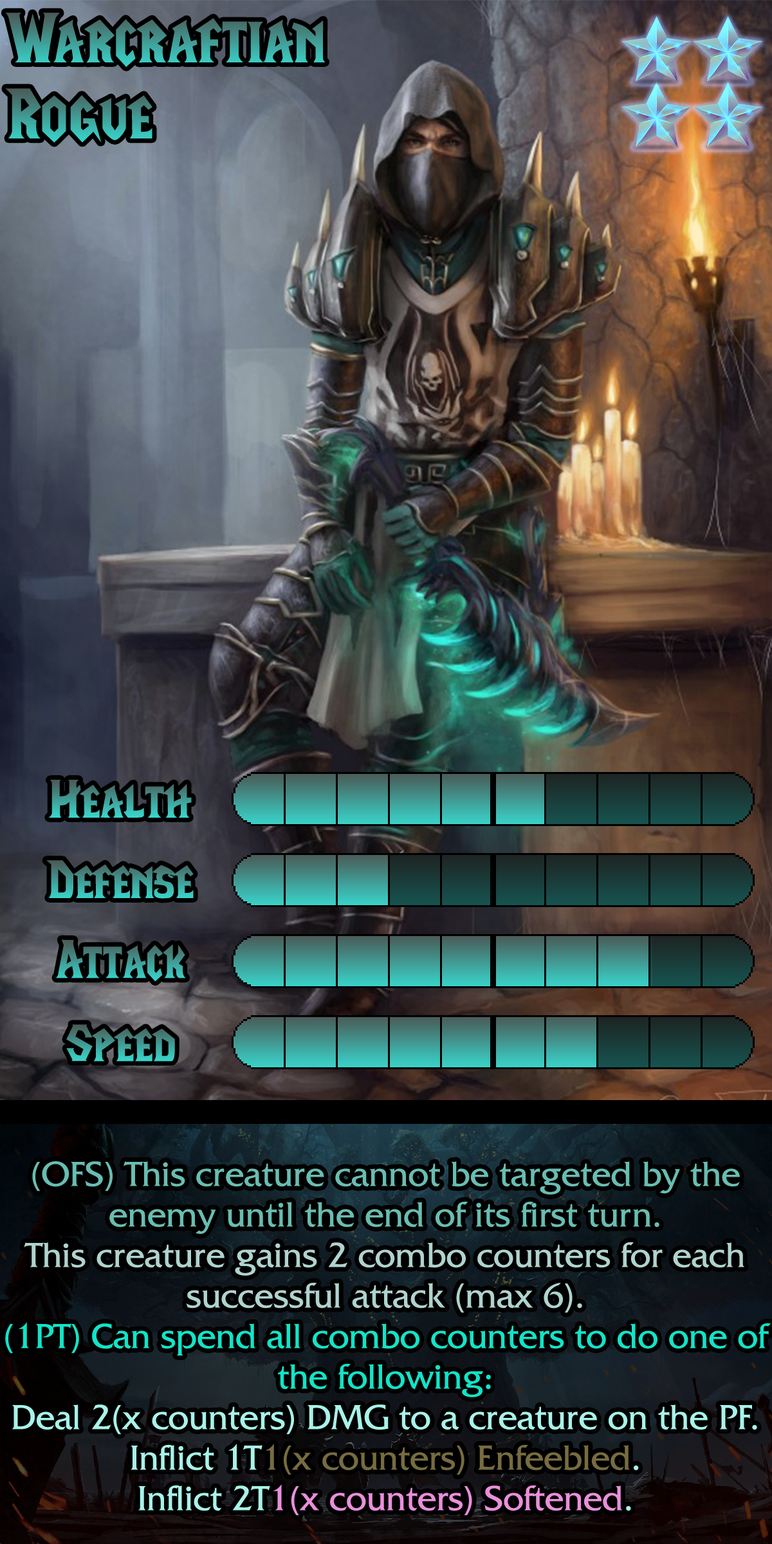
<style>
.page{position:relative;width:772px;height:1544px}
.page>*{position:absolute;margin:0}
.t1{font:121.6px "LifeCraft"}
.t2{font:92.7px "LifeCraft"}
.t3{font:62.4px/40.5px "FrizQuadrataStd";color:#68bdb2}
.t4{font:62.4px/40.5px "FrizQuadrataStd";color:#afd3ce}
.t5{font:62.4px/40.5px "FrizQuadrataStd";color:#11e4c8}
.t6{font:62.4px/40.5px "FrizQuadrataStd";color:#a8f3e9}
.t7{font:62.4px/40.5px "FrizQuadrataStd";color:#776c40}
.t8{font:62.4px/40.5px "FrizQuadrataStd";color:#e98fdb}
</style>
<div class="page">
<p class="t1" style="left:5px;top:12px;width:321px;height:55px">Warcraftian</p>
<p class="t1" style="left:6px;top:88px;width:146px;height:55px">Rogue</p>
<p class="t2" style="left:49px;top:780px;width:143px;height:38px">Health</p>
<p class="t2" style="left:46px;top:860px;width:148px;height:39px">Defense</p>
<p class="t2" style="left:56px;top:939px;width:130px;height:43px">Attack</p>
<p class="t2" style="left:66px;top:1024px;width:109px;height:38px">Speed</p>
<p class="t3" style="left:5px;top:1161px;width:766px;height:355px;text-align:center">(OFS) This creature cannot be targeted by the enemy until the end of its first turn.<br><span class="t4">This creature gains 2 combo counters for each successful attack (max 6).<br></span><span class="t5">(1PT) Can spend all combo counters to do one of the following:<br></span><span class="t6">Deal 2(x counters) DMG to a creature on the PF.<br>Inflict 1T</span><span class="t7">1(x counters) Enfeebled</span><span class="t6">.<br>Inflict 2T</span><span class="t8">1(x counters) Softened</span><span class="t6">.</span></p>
</div>
